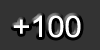
<style>
.page{position:relative;width:100px;height:50px;background:#333333}
.page>*{position:absolute;margin:0}
.t1{font:29.6px "ArialMT";letter-spacing:-0.015em;color:#ffffff;scale:1.07 1}
</style>
<div class="page">
<p class="t1" style="left:13px;top:15px;width:68px;height:23px">+100</p>
</div>
